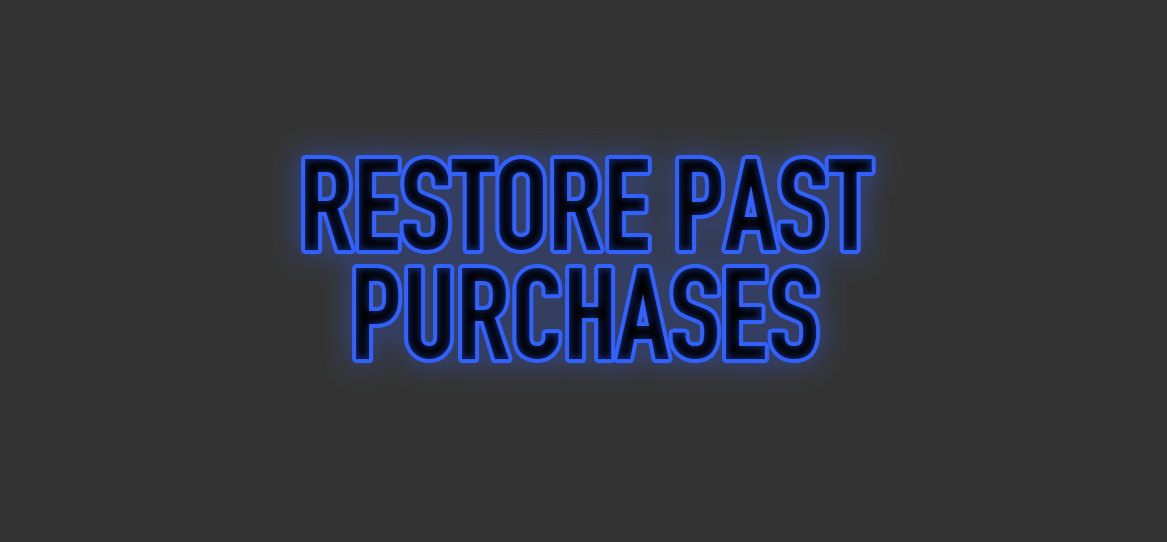
<style>
.page{position:relative;width:1167px;height:542px;background:#333333}
.page>*{position:absolute;margin:0}
.t1{font:127.5px/108.4px "DINEngschrift";color:#060d21;text-transform:uppercase}
</style>
<div class="page">
<p class="t1" style="left:305px;top:159px;width:567px;height:201px;text-align:center">restore past <br>purchases</p>
</div>
